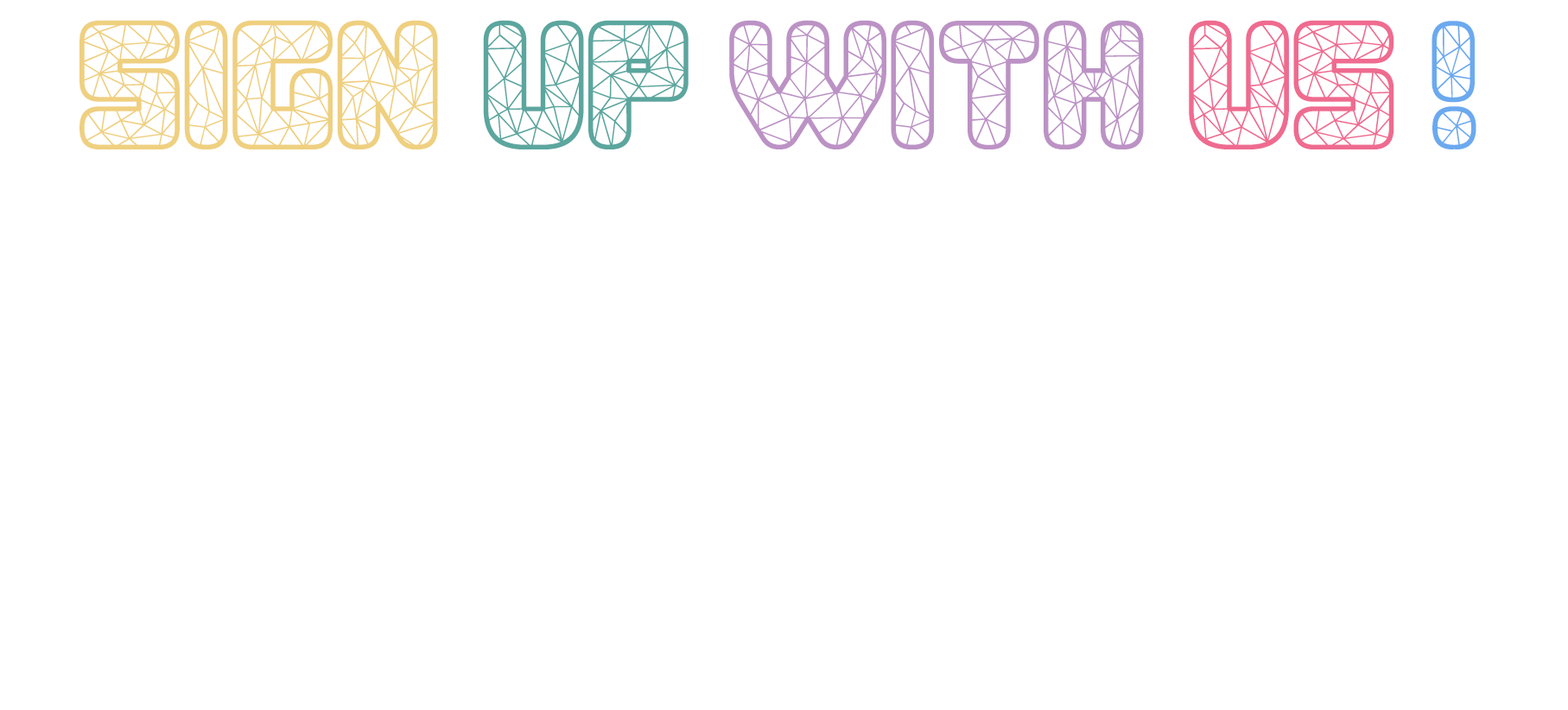
<style>
.page{position:relative;width:1568px;height:710px;background:#ffffff}
.page>*{position:absolute;margin:0}
.t1{font:185.1px "Duration-Regular";color:#efd080}
.t2{font:185.1px "Duration-Regular";color:#5ba69e}
.t3{font:185.1px "Duration-Regular";color:#bc92c5}
.t4{font:185.1px "Duration-Regular";color:#ef6b90}
.t5{font:185.1px "Duration-Regular";color:#6ba9ef}
</style>
<div class="page">
<p class="t1" style="left:79px;top:20px;width:359px;height:129px">SIGN</p>
<p class="t2" style="left:483px;top:20px;width:206px;height:129px">UP</p>
<p class="t3" style="left:729px;top:20px;width:415px;height:129px">WITH</p>
<p class="t4" style="left:1189px;top:20px;width:205px;height:129px">US</p>
<p class="t5" style="left:1432px;top:21px;width:44px;height:128px">!</p>
</div>
